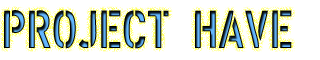
<style>
.page{position:relative;width:320px;height:60px;background:#ffffff}
.page>*{position:absolute;margin:0}
.t1{font:52.7px "XXIISTRAIGHT-ARMY"}
</style>
<div class="page">
<p class="t1" style="left:4px;top:10px;width:288px;height:39px">PROJECT HAVE</p>
</div>
